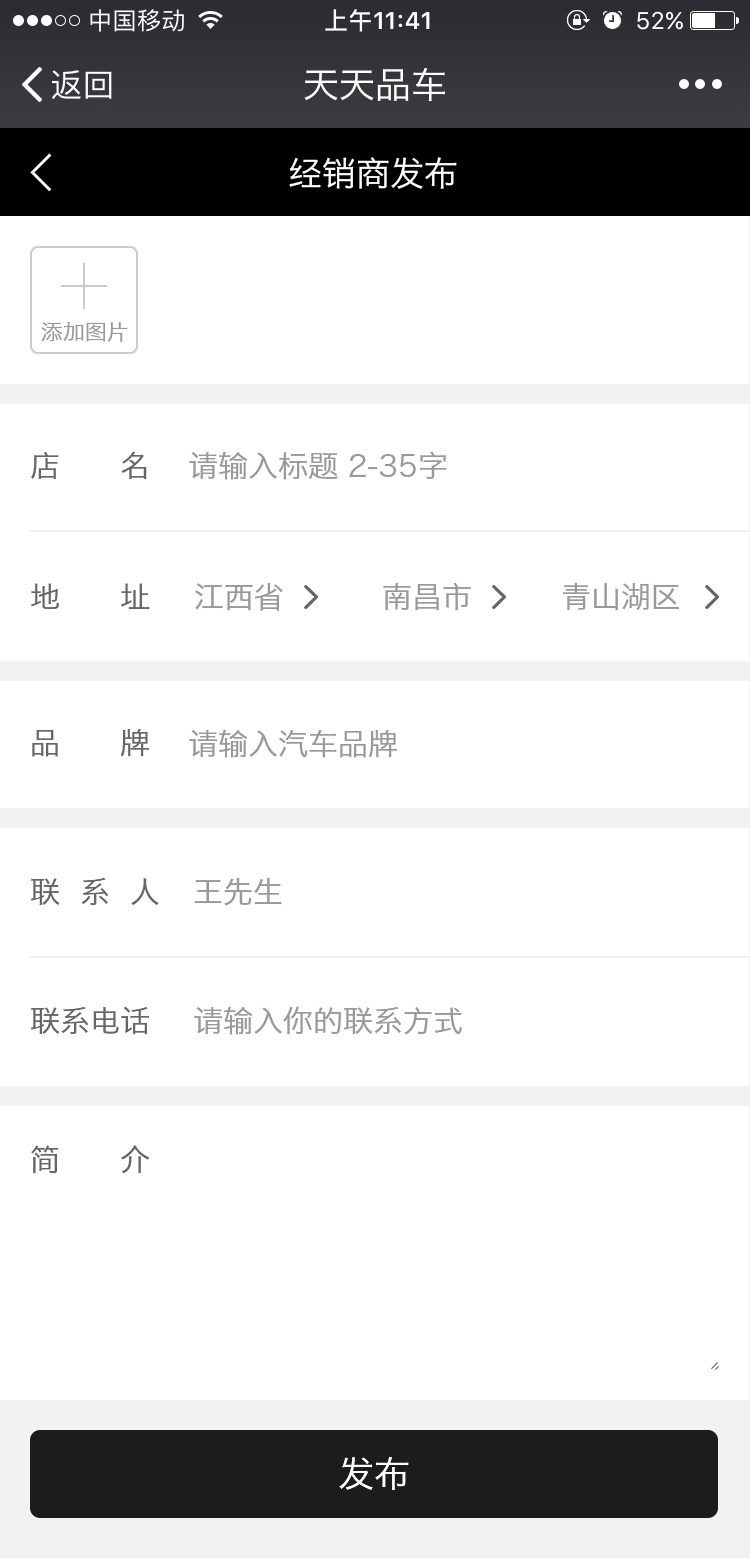
<style>
.page{position:relative;width:750px;height:1558px;background:#ffffff}
.page>*{position:absolute;margin:0}
.t1{font:36px "HiraginoSansGB-W3";color:#ffffff}
.t2{font:34px "HiraginoSansGB-W3";color:#ffffff}
.t3{font:22px "HiraginoSansGB-W3";color:#999999}
.t4{font:30px "HiraginoSansGB-W3";color:#666666;text-transform:uppercase}
.t5{font:30px "HiraginoSansGB-W3";color:#999999;text-transform:uppercase}
.t6{font:36px "HiraginoSansGB-W3";color:#ffffff;text-transform:uppercase}
</style>
<div class="page">
<p class="t1" style="left:304px;top:68px;width:141px;height:34px">天天品车</p>
<p class="t2" style="left:289px;top:157px;width:168px;height:32px">经销商发布</p>
<p class="t3" style="left:41px;top:322px;width:87px;height:20px">添加图片</p>
<p class="t4" style="left:31px;top:451px;width:116px;height:29px">店      名</p>
<p class="t5" style="left:189px;top:451px;width:258px;height:29px">请输入标题 2-35字</p>
<p class="t5" style="left:383px;top:582px;width:88px;height:29px">南昌市</p>
<p class="t5" style="left:563px;top:582px;width:116px;height:29px">青山湖区</p>
<p class="t4" style="left:31px;top:583px;width:119px;height:27px">地      址</p>
<p class="t5" style="left:195px;top:583px;width:88px;height:28px">江西省</p>
<p class="t4" style="left:32px;top:729px;width:117px;height:28px">品      牌</p>
<p class="t5" style="left:189px;top:729px;width:208px;height:29px">请输入汽车品牌</p>
<p class="t4" style="left:31px;top:877px;width:128px;height:28px">联  系  人</p>
<p class="t5" style="left:194px;top:877px;width:88px;height:29px">王先生</p>
<p class="t4" style="left:31px;top:1006px;width:118px;height:29px">联系电话</p>
<p class="t5" style="left:194px;top:1006px;width:268px;height:29px">请输入你的联系方式</p>
<p class="t4" style="left:31px;top:1145px;width:119px;height:29px">简      介</p>
<p class="t6" style="left:339px;top:1456px;width:70px;height:34px">发布</p>
</div>
